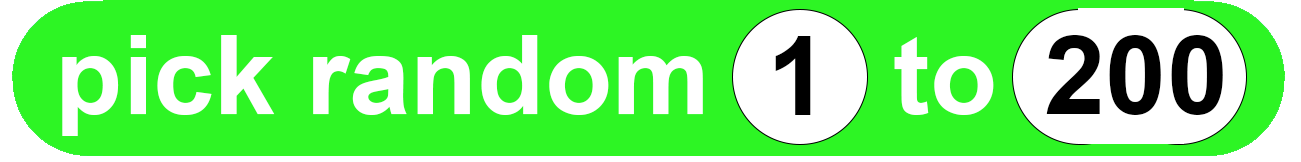
<style>
.page{position:relative;width:1301px;height:162px;background:#2df524}
.page>*{position:absolute;margin:0}
.t1{font:110px "Arial-BoldMT";color:#ffffff}
.t2{font:110px "Arial-BoldMT";color:#000000}
</style>
<div class="page">
<p class="t1" style="left:62px;top:35px;width:932px;height:101px">pick random      to</p>
<p class="t2" style="left:775px;top:36px;width:36px;height:79px">1</p>
<p class="t2" style="left:1046px;top:35px;width:177px;height:80px">200</p>
</div>
